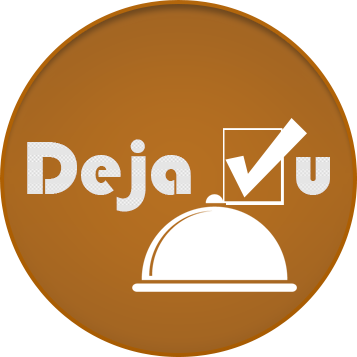
<style>
.page{position:relative;width:357px;height:357px;background:#ffffff}
.page>*{position:absolute;margin:0}
.t1{font:77.5px "Bauhaus93";color:#d4d4d4}
.t2{font:77.5px "Bauhaus93";color:#d4cec7}
</style>
<div class="page">
<p class="t1" style="left:27px;top:139px;width:303px;height:73px">Deja <span class="t2">    u</span></p>
</div>
